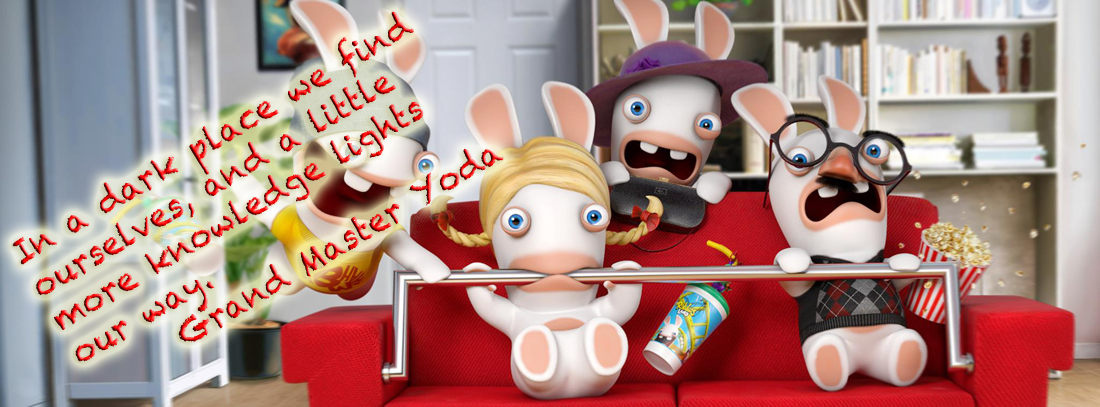
<style>
.page{position:relative;width:1100px;height:407px}
.page>*{position:absolute;margin:0}
.t1{font:32.2px "Chalkduster"}
</style>
<div class="page">
<p class="t1" style="left:12px;top:11px;width:492px;height:351px;rotate:-31deg">In a dark place we find <br>ourselves, and a little <br>more knowledge lights <br>our way.<br>      Grand Master Yoda</p>
</div>
